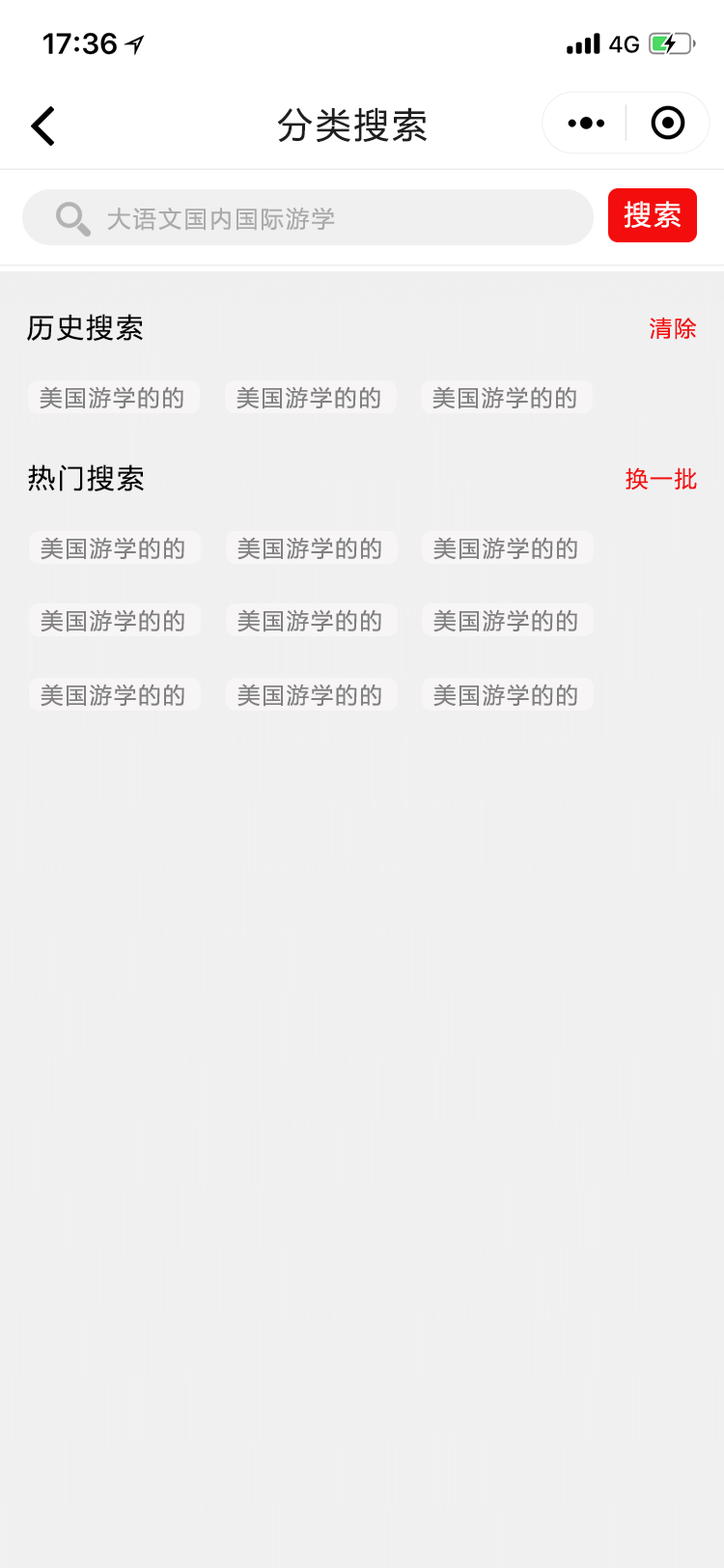
<style>
.page{position:relative;width:724px;height:1568px;background:#f0f0f0}
.page>*{position:absolute;margin:0}
.t1{font:34.8px "MicrosoftYaHei";letter-spacing:0.1em;color:#201f20}
.t2{font:23.2px "MicrosoftYaHei";letter-spacing:0.1em;color:#abaaaa}
.t3{font:27px "MicrosoftYaHei";letter-spacing:0.1em;color:#fbf8f8}
.t4{font:27px "MicrosoftYaHei";letter-spacing:0.1em;color:#020202}
.t5{font:22.2px "MicrosoftYaHei";letter-spacing:0.1em;color:#f21010}
.t6{font:22.2px "MicrosoftYaHei";letter-spacing:0.1em;color:#818080}
</style>
<div class="page">
<p class="t1" style="left:277px;top:107px;width:150px;height:36px">分类搜索</p>
<p class="t2" style="left:107px;top:207px;width:228px;height:24px">大语文国内国际游学</p>
<p class="t3" style="left:624px;top:201px;width:57px;height:27px">搜索</p>
<p class="t4" style="left:27px;top:314px;width:116px;height:27px">历史搜索</p>
<p class="t5" style="left:650px;top:317px;width:47px;height:23px">清除</p>
<p class="t6" style="left:40px;top:386px;width:143px;height:23px">美国游学的的</p>
<p class="t6" style="left:237px;top:386px;width:143px;height:23px">美国游学的的</p>
<p class="t6" style="left:433px;top:386px;width:143px;height:23px">美国游学的的</p>
<p class="t4" style="left:28px;top:464px;width:116px;height:27px">热门搜索</p>
<p class="t5" style="left:626px;top:467px;width:71px;height:23px">换一批</p>
<p class="t6" style="left:41px;top:537px;width:143px;height:23px">美国游学的的</p>
<p class="t6" style="left:238px;top:537px;width:143px;height:23px">美国游学的的</p>
<p class="t6" style="left:434px;top:537px;width:143px;height:23px">美国游学的的</p>
<p class="t6" style="left:41px;top:609px;width:143px;height:23px">美国游学的的</p>
<p class="t6" style="left:238px;top:609px;width:143px;height:23px">美国游学的的</p>
<p class="t6" style="left:434px;top:609px;width:143px;height:23px">美国游学的的</p>
<p class="t6" style="left:41px;top:684px;width:143px;height:23px">美国游学的的</p>
<p class="t6" style="left:238px;top:684px;width:143px;height:23px">美国游学的的</p>
<p class="t6" style="left:434px;top:684px;width:143px;height:23px">美国游学的的</p>
</div>
